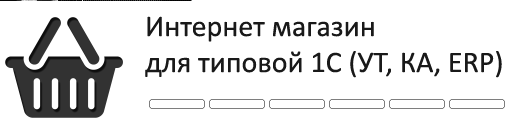
<style>
.page{position:relative;width:512px;height:128px;background:#ffffff}
.page>*{position:absolute;margin:0}
.t1{font:30px/36px "Calibri";color:#191919}
</style>
<div class="page">
<p class="t1" style="left:145px;top:16px;width:357px;height:62px">Интернет магазин<br>для типовой 1С (УТ, КА, ERP)</p>
</div>
